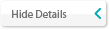
<style>
.page{position:relative;width:110px;height:30px;background:#ffffff}
.page>*{position:absolute;margin:0}
.t1{font:11px "MyriadPro-Regular";color:#737373}
</style>
<div class="page">
<p class="t1" style="left:12px;top:10px;width:55px;height:8px">Hide Details</p>
</div>
